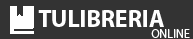
<style>
.page{position:relative;width:193px;height:39px;background:#333333}
.page>*{position:absolute;margin:0}
.t1{font:24px "MyriadPro-Bold";color:#ffffff}
.t2{font:12px "MyriadPro-Regular";color:#ffffff}
</style>
<div class="page">
<p class="t1" style="left:38px;top:10px;width:28px;height:17px">TU</p>
<p class="t1" style="left:69px;top:10px;width:95px;height:17px">LIBRERIA</p>
<p class="t2" style="left:151px;top:29px;width:39px;height:9px">ONLINE</p>
</div>
